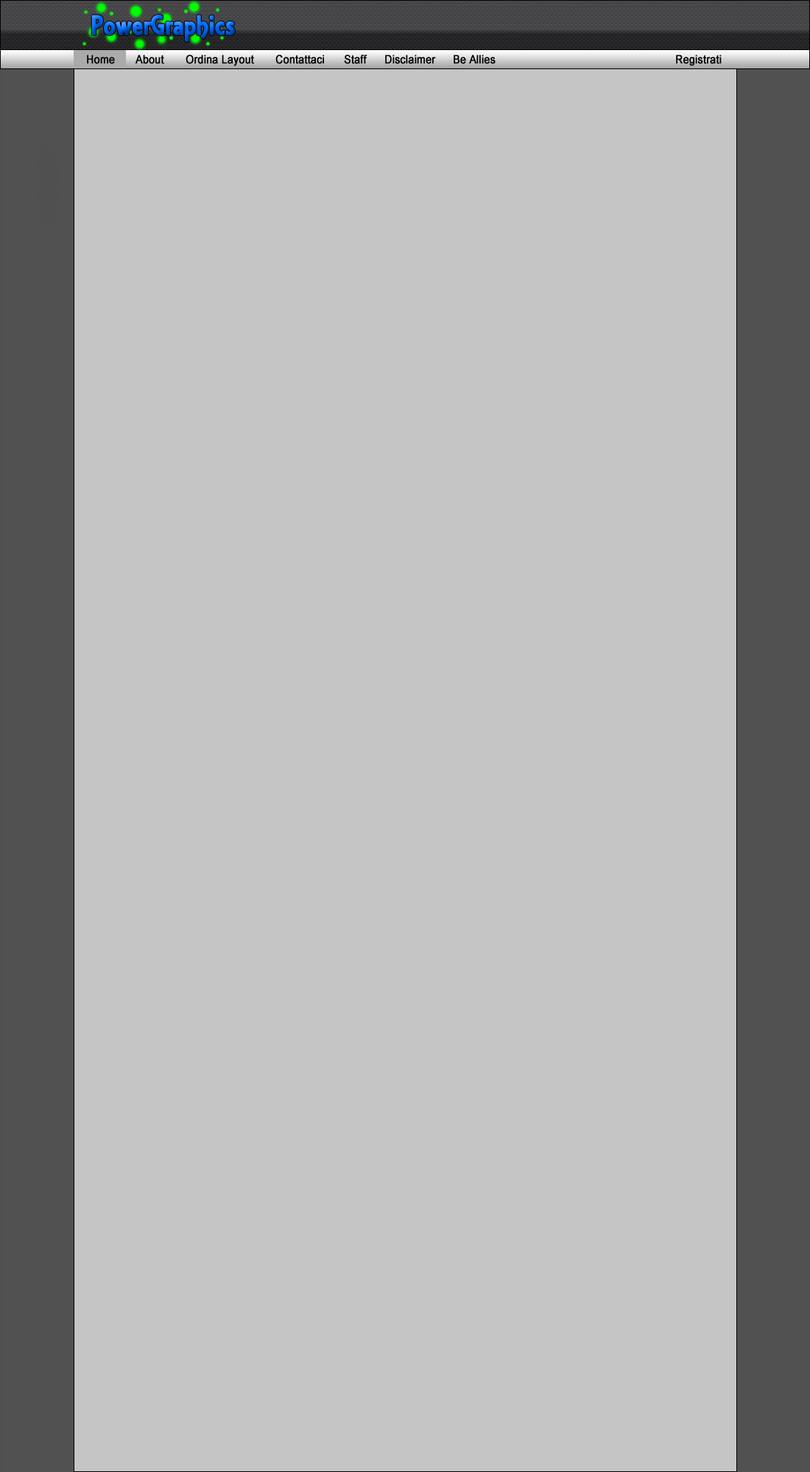
<style>
.page{position:relative;width:810px;height:1472px;background:#c5c5c5}
.page>*{position:absolute;margin:0}
.t1{font:29.2px "ARESSENCE";font-weight:bold;scale:0.91 1}
.t2{font:11.3px "ArialMT";color:#000000;font-weight:bold;scale:0.91 1}
</style>
<div class="page">
<p class="t1" style="left:91px;top:15px;width:144px;height:27px">PowerGraphics</p>
<p class="t2" style="left:87px;top:54px;width:28px;height:10px">Home</p>
<p class="t2" style="left:135px;top:54px;width:29px;height:10px">About</p>
<p class="t2" style="left:186px;top:54px;width:68px;height:12px">Ordina Layout</p>
<p class="t2" style="left:275px;top:54px;width:49px;height:10px">Contattaci</p>
<p class="t2" style="left:344px;top:54px;width:23px;height:10px">Staff</p>
<p class="t2" style="left:385px;top:54px;width:51px;height:10px">Disclaimer</p>
<p class="t2" style="left:454px;top:54px;width:41px;height:10px">Be Allies</p>
<p class="t2" style="left:676px;top:54px;width:45px;height:12px">Registrati</p>
</div>
